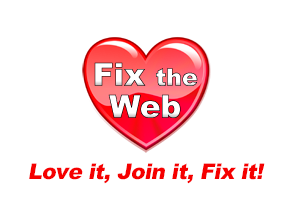
<style>
.page{position:relative;width:294px;height:219px;background:#ffffff}
.page>*{position:absolute;margin:0}
.t1{font:21.4px "Arial-Black";letter-spacing:-0.025em;color:#f50000;font-style:italic}
</style>
<div class="page">
<p class="t1" style="left:29px;top:163px;width:236px;height:21px">Love it, Join it, Fix it!</p>
</div>
